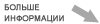
<style>
.page{position:relative;width:100px;height:24px;background:#ffffff}
.page>*{position:absolute;margin:0}
.t1{font:8px/10.9px "ArialMT";letter-spacing:-0.005em;color:#4c4c4c;font-weight:bold}
</style>
<div class="page">
<p class="t1" style="left:4px;top:4px;width:60px;height:19px">БОЛЬШЕ<br>ИНФОРМАЦИИ</p>
</div>
